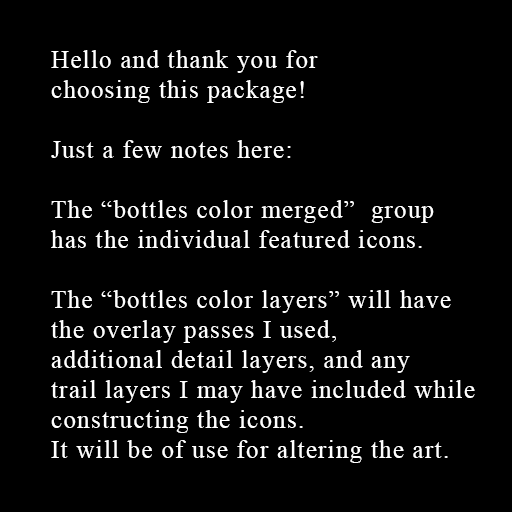
<style>
.page{position:relative;width:512px;height:512px;background:#000000}
.page>*{position:absolute;margin:0}
.t1{font:25px "TimesNewRomanPSMT";letter-spacing:0.05em;color:#ffffff}
</style>
<div class="page">
<p class="t1" style="left:51px;top:50px;width:424px;height:413px">Hello and thank you for<br>choosing this package!<br><br>Just a few notes here:<br><br>The “bottles color merged”  group <br>has the individual featured icons.<br><br>The “bottles color layers” will have<br>the overlay passes I used,<br>additional detail layers, and any<br>trail layers I may have included while<br>constructing the icons. <br>It will be of use for altering the art.</p>
</div>
